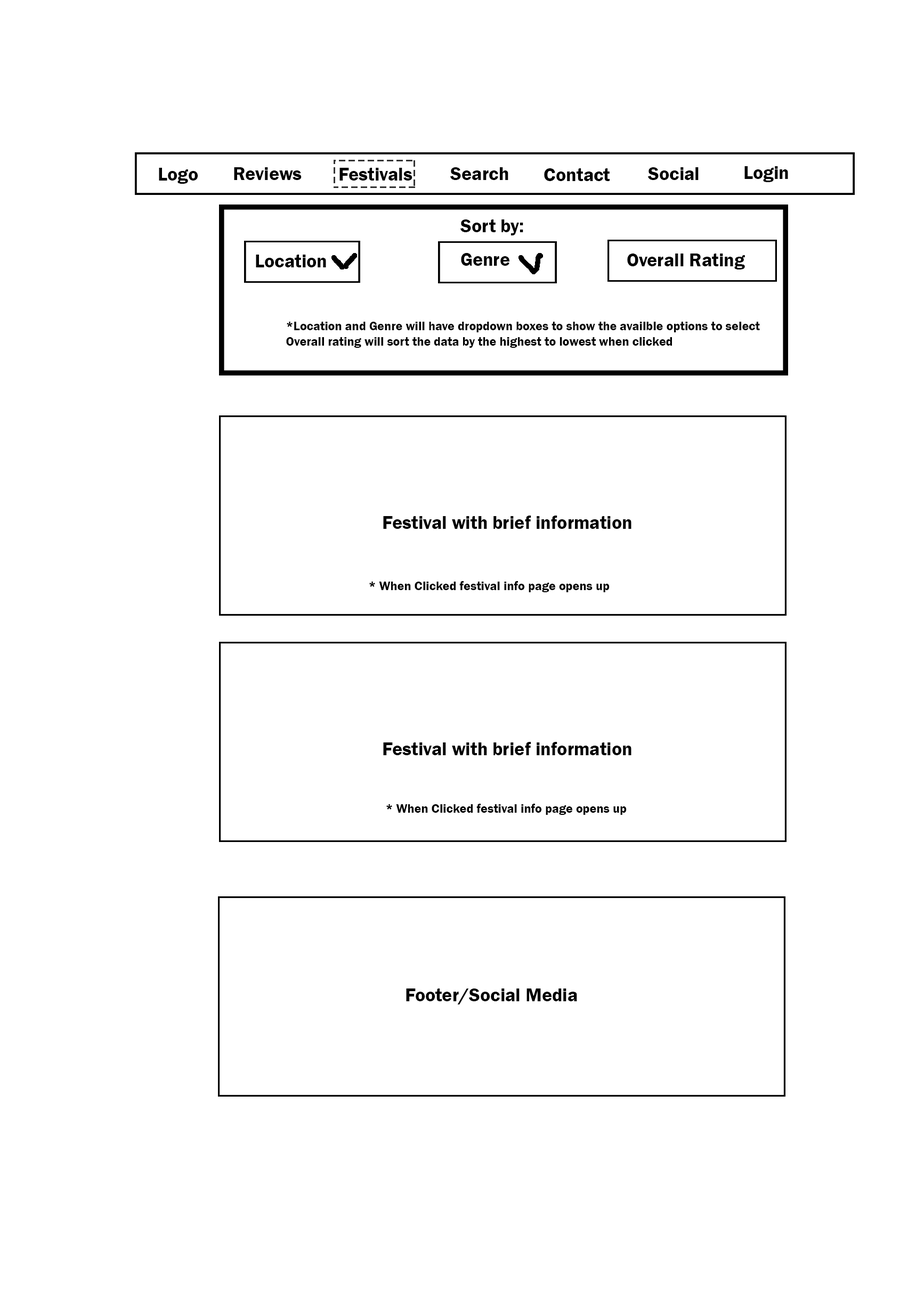
<style>
.page{position:relative;width:924px;height:1291px;background:#ffffff}
.page>*{position:absolute;margin:0}
.t1{font:19.1px "FranklinGothic-Demi";color:#000000}
.t2{font:12.8px "FranklinGothic-Demi";color:#000000}
</style>
<div class="page">
<p class="t1" style="left:159px;top:168px;width:39px;height:16px">Logo</p>
<p class="t1" style="left:234px;top:167px;width:67px;height:13px">Reviews</p>
<p class="t1" style="left:339px;top:168px;width:73px;height:13px">Festivals</p>
<p class="t1" style="left:450px;top:167px;width:58px;height:13px">Search</p>
<p class="t1" style="left:544px;top:168px;width:66px;height:13px">Contact</p>
<p class="t1" style="left:648px;top:167px;width:50px;height:13px">Social</p>
<p class="t1" style="left:744px;top:166px;width:44px;height:16px">Login</p>
<p class="t1" style="left:460px;top:219px;width:63px;height:16px">Sort by:</p>
<p class="t1" style="left:256px;top:255px;width:70px;height:12px">Location</p>
<p class="t1" style="left:461px;top:253px;width:49px;height:13px">Genre</p>
<p class="t1" style="left:627px;top:254px;width:118px;height:16px">Overall Rating</p>
<p class="t2" style="left:286px;top:322px;width:474px;height:26px">*Location and Genre will have dropdown boxes to show the availble options to select<br>Overall rating will sort the data by the highest to lowest when clicked</p>
<p class="t1" style="left:383px;top:516px;width:248px;height:13px">Festival with brief information</p>
<p class="t2" style="left:369px;top:581px;width:240px;height:11px">* When Clicked festival info page opens up</p>
<p class="t1" style="left:383px;top:742px;width:248px;height:13px">Festival with brief information</p>
<p class="t2" style="left:386px;top:804px;width:240px;height:11px">* When Clicked festival info page opens up</p>
<p class="t1" style="left:406px;top:989px;width:171px;height:16px">Footer/Social Media</p>
</div>
